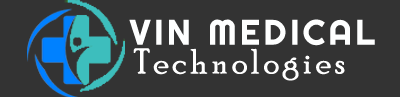
<style>
.page{position:relative;width:400px;height:97px;background:#333333}
.page>*{position:absolute;margin:0}
.t1{font:35px "Righteous-Regular";letter-spacing:0.1em;color:#feffff}
.t2{font:35.3px "PoorRichard-Regular";letter-spacing:0.1em;color:#ffffff}
</style>
<div class="page">
<p class="t1" style="left:129px;top:19px;width:246px;height:27px">VIN MEDICAL</p>
<p class="t2" style="left:133px;top:48px;width:212px;height:33px">Technologies</p>
</div>
